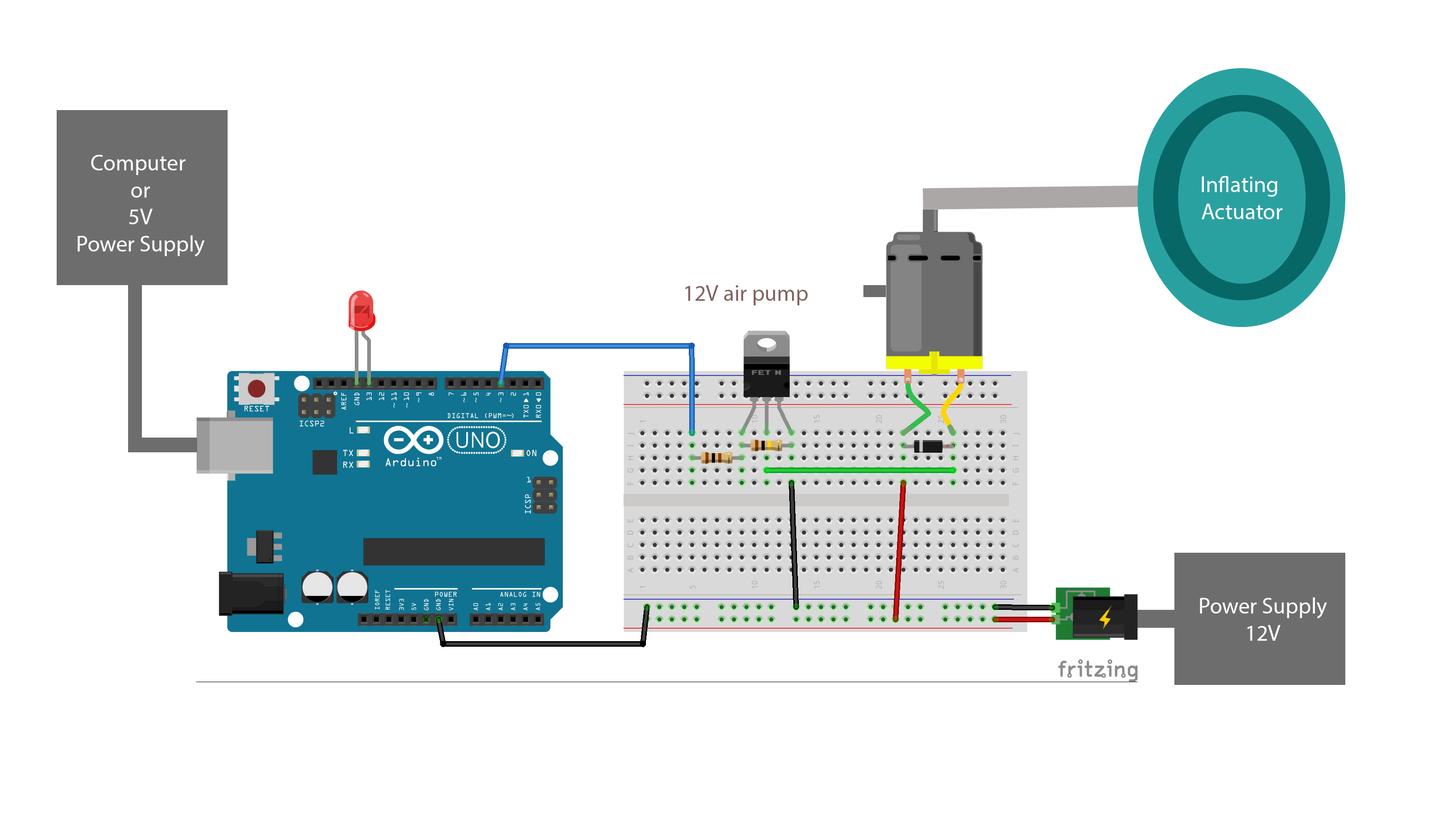
<style>
.page{position:relative;width:1437px;height:830px;background:#ffffff}
.page>*{position:absolute;margin:0}
.t1{font:22.6px "MyriadPro-Regular";color:#ffffff}
.t2{font:22.6px "MyriadPro-Regular";color:#826262}
</style>
<div class="page">
<p class="t1" style="left:77px;top:155px;width:128px;height:102px;text-align:center">Computer <br>or<br>5V<br>Power Supply</p>
<p class="t1" style="left:1201px;top:176px;width:81px;height:43px;text-align:center">Inflating <br>Actuator</p>
<p class="t2" style="left:685px;top:285px;width:122px;height:20px">12V air pump</p>
<p class="t1" style="left:1199px;top:597px;width:128px;height:44px;text-align:center">Power Supply<br>12V</p>
</div>
